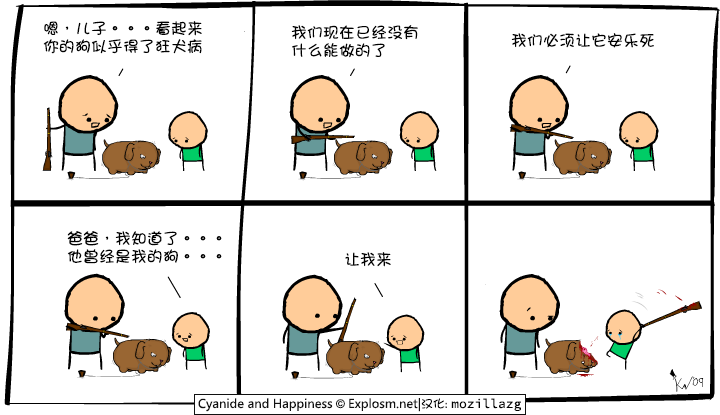
<style>
.page{position:relative;width:720px;height:415px;background:#ffffff}
.page>*{position:absolute;margin:0}
.t1{font:16px/18px "DFGirl";color:#000000}
.t2{font:16px "DFGirl";color:#000000}
</style>
<div class="page">
<p class="t1" style="left:43px;top:21px;width:159px;height:33px">嗯，儿子。。。看起来<br>你的狗似乎得了狂犬病</p>
<p class="t1" style="left:291px;top:25px;width:127px;height:33px">我们现在已经没有<br>什么能做的了</p>
<p class="t2" style="left:511px;top:33px;width:143px;height:15px">我们必须让它安乐死</p>
<p class="t1" style="left:67px;top:231px;width:155px;height:33px">爸爸，我知道了。。。<br>他曾经是我的狗。。。</p>
<p class="t2" style="left:345px;top:252px;width:46px;height:15px">让我来</p>
</div>
